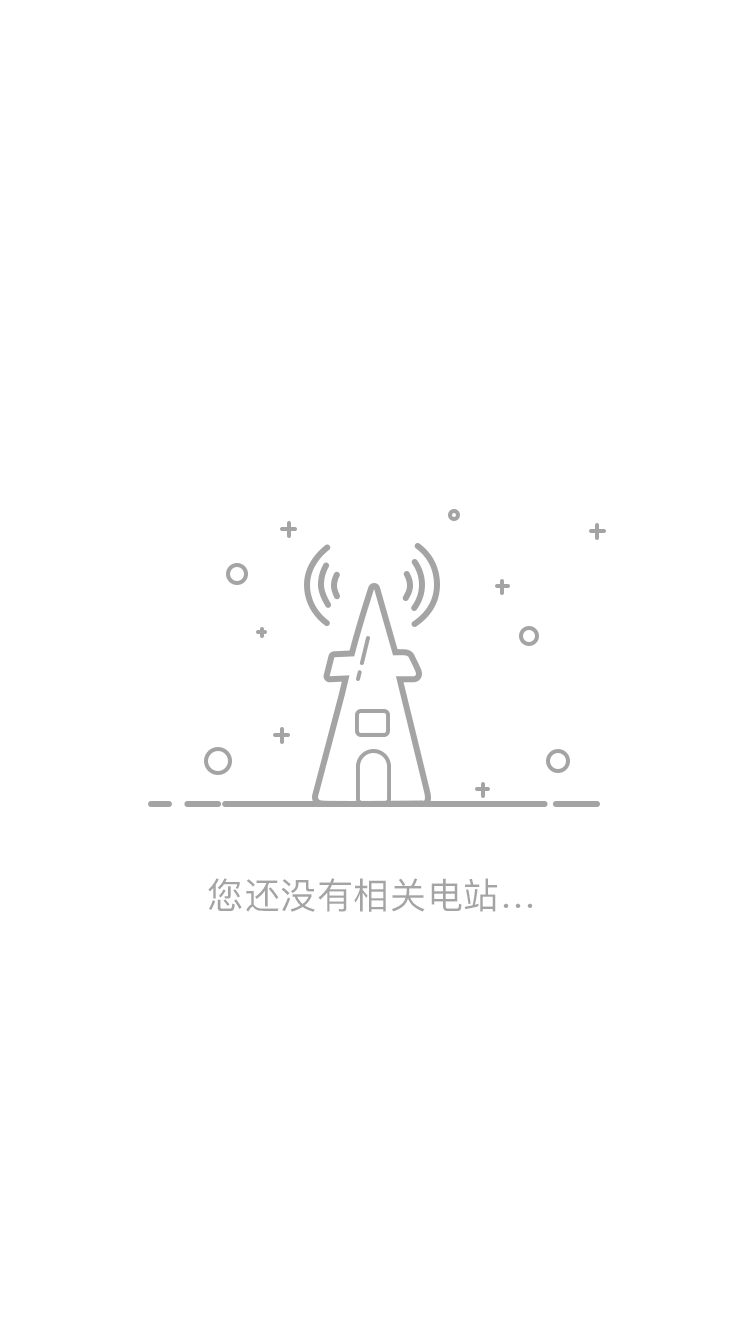
<style>
.page{position:relative;width:750px;height:1334px;background:#ffffff}
.page>*{position:absolute;margin:0}
.t1{font:36px "PingFang-SC-Medium";letter-spacing:0.005em;color:#a4a4a4}
</style>
<div class="page">
<p class="t1" style="left:208px;top:878px;width:325px;height:34px">您还没有相关电站…</p>
</div>
